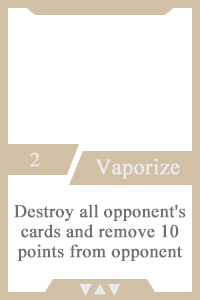
<style>
.page{position:relative;width:200px;height:300px;background:#ffffff}
.page>*{position:absolute;margin:0}
.t1{font:20px "TimesNewRomanPSMT";color:#e9e9e9;font-weight:bold}
.t2{font:22px "TimesNewRomanPSMT";color:#e9e9e9;font-weight:bold}
.t3{font:18px/20px "TimesNewRomanPSMT";color:#6f6f6f;font-weight:bold}
.t4{font:14px "AdobeHeitiStd-Regular";color:#e9e9e9;font-weight:bold}
</style>
<div class="page">
<p class="t1" style="left:30px;top:152px;width:10px;height:15px">2</p>
<p class="t2" style="left:95px;top:158px;width:85px;height:21px">Vaporize</p>
<p class="t3" style="left:14px;top:204px;width:172px;height:57px;text-align:center">Destroy all opponent's cards and remove 10 points from opponent</p>
<p class="t4" style="left:79px;top:284px;width:42px;height:12px">▼▲▼</p>
</div>
